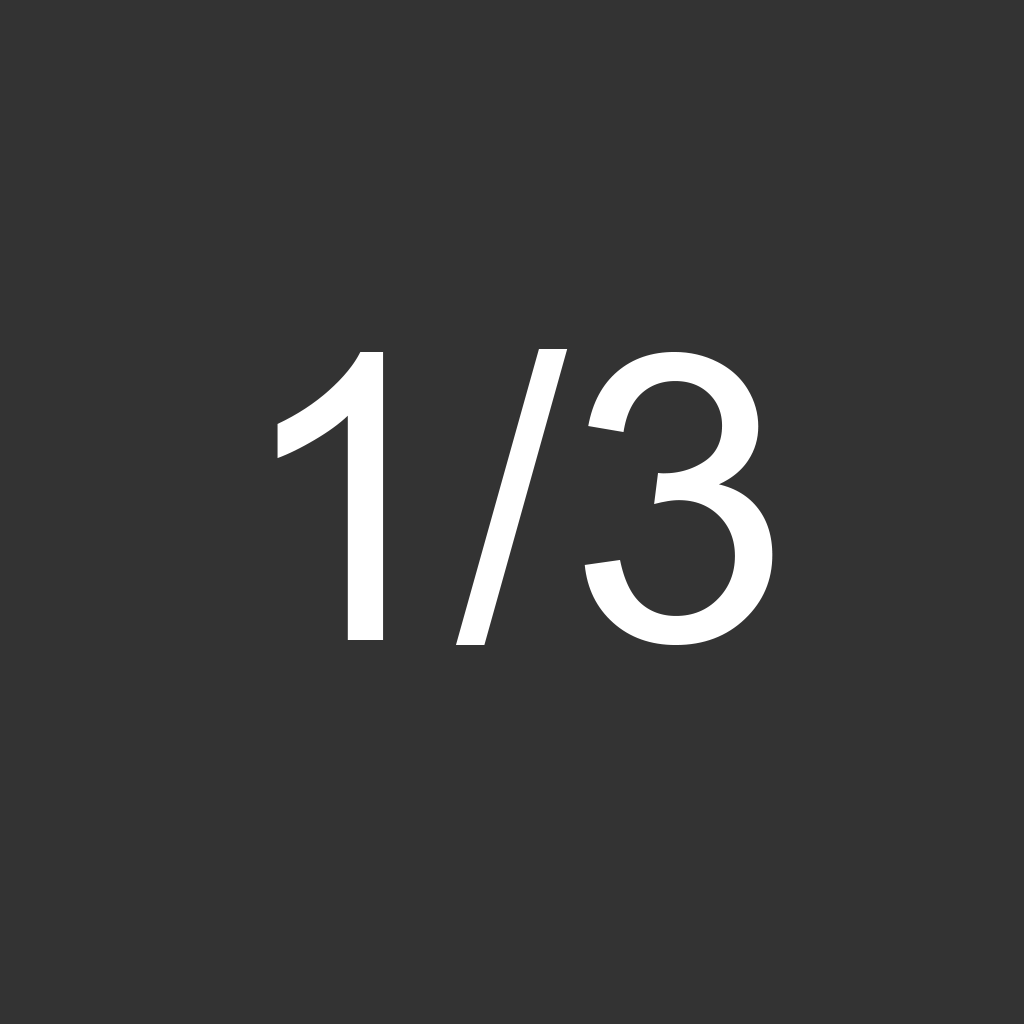
<style>
.page{position:relative;width:1024px;height:1024px;background:#333333}
.page>*{position:absolute;margin:0}
.t1{font:400px "ArialMT";color:#ffffff}
</style>
<div class="page">
<p class="t1" style="left:277px;top:349px;width:496px;height:296px">1/3</p>
</div>
